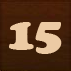
<style>
.page{position:relative;width:71px;height:71px}
.page>*{position:absolute;margin:0}
.t1{font:48px "CooperBlack";color:#eccaa4}
</style>
<div class="page">
<p class="t1" style="left:9px;top:22px;width:53px;height:32px">15</p>
</div>
